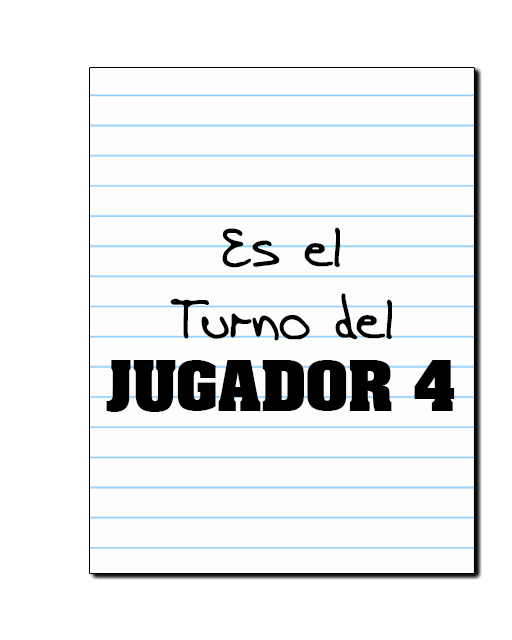
<style>
.page{position:relative;width:512px;height:640px;background:#ffffff}
.page>*{position:absolute;margin:0}
.t1{font:60px/72px "AEnigmaScrawl4BRK";color:#000000}
.t2{font:60px/72px "AardvarkBold";color:#000000}
</style>
<div class="page">
<p class="t1" style="left:106px;top:227px;width:349px;height:185px;text-align:center">Es el<br>Turno del<br><span class="t2">JUGADOR 4</span></p>
</div>
